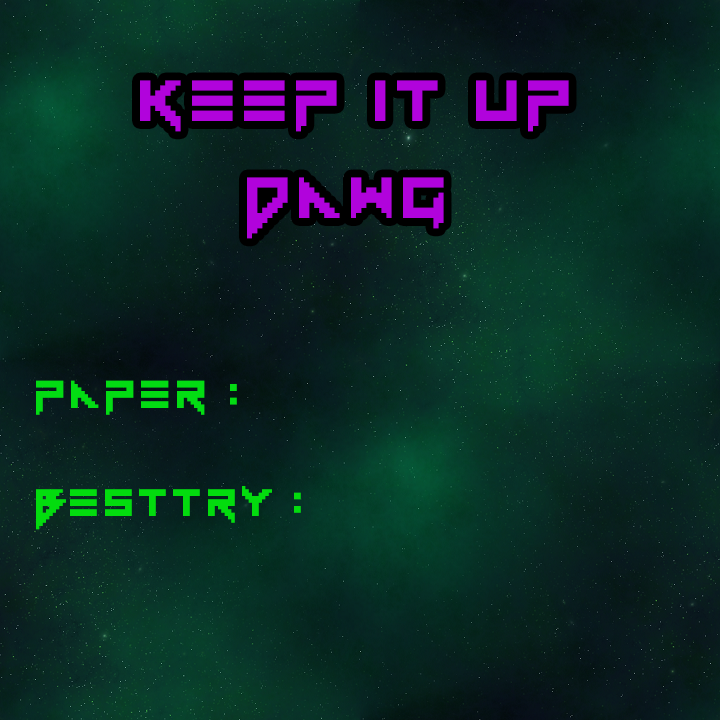
<style>
.page{position:relative;width:720px;height:720px}
.page>*{position:absolute;margin:0}
.t1{font:81px "Vermin-Vibes-1989";letter-spacing:0.08em;color:#b103dc}
.t2{font:54.6px "Vermin-Vibes-1989";letter-spacing:0.08em;color:#03dc13}
.t3{font:53.3px "Vermin-Vibes-1989";letter-spacing:0.08em;color:#03dc0e}
</style>
<div class="page">
<p class="t1" style="left:140px;top:80px;width:429px;height:159px">keep it up<br>    dawg</p>
<p class="t2" style="left:36px;top:380px;width:201px;height:35px">paper :</p>
<p class="t3" style="left:36px;top:486px;width:265px;height:44px">besttry :</p>
</div>
